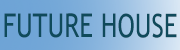
<style>
.page{position:relative;width:180px;height:50px}
.page>*{position:absolute;margin:0}
.t1{font:32.7px "TrebuchetMS";color:#0f4a5b;scale:0.78 1}
</style>
<div class="page">
<p class="t1" style="left:4px;top:13px;width:173px;height:25px">FUTURE HOUSE</p>
</div>
